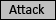
<style>
.page{position:relative;width:56px;height:20px;background:#c0c0c0}
.page>*{position:absolute;margin:0}
.t1{font:14px "Calibri";color:#000000}
</style>
<div class="page">
<p class="t1" style="left:9px;top:4px;width:36px;height:10px">Attack</p>
</div>
